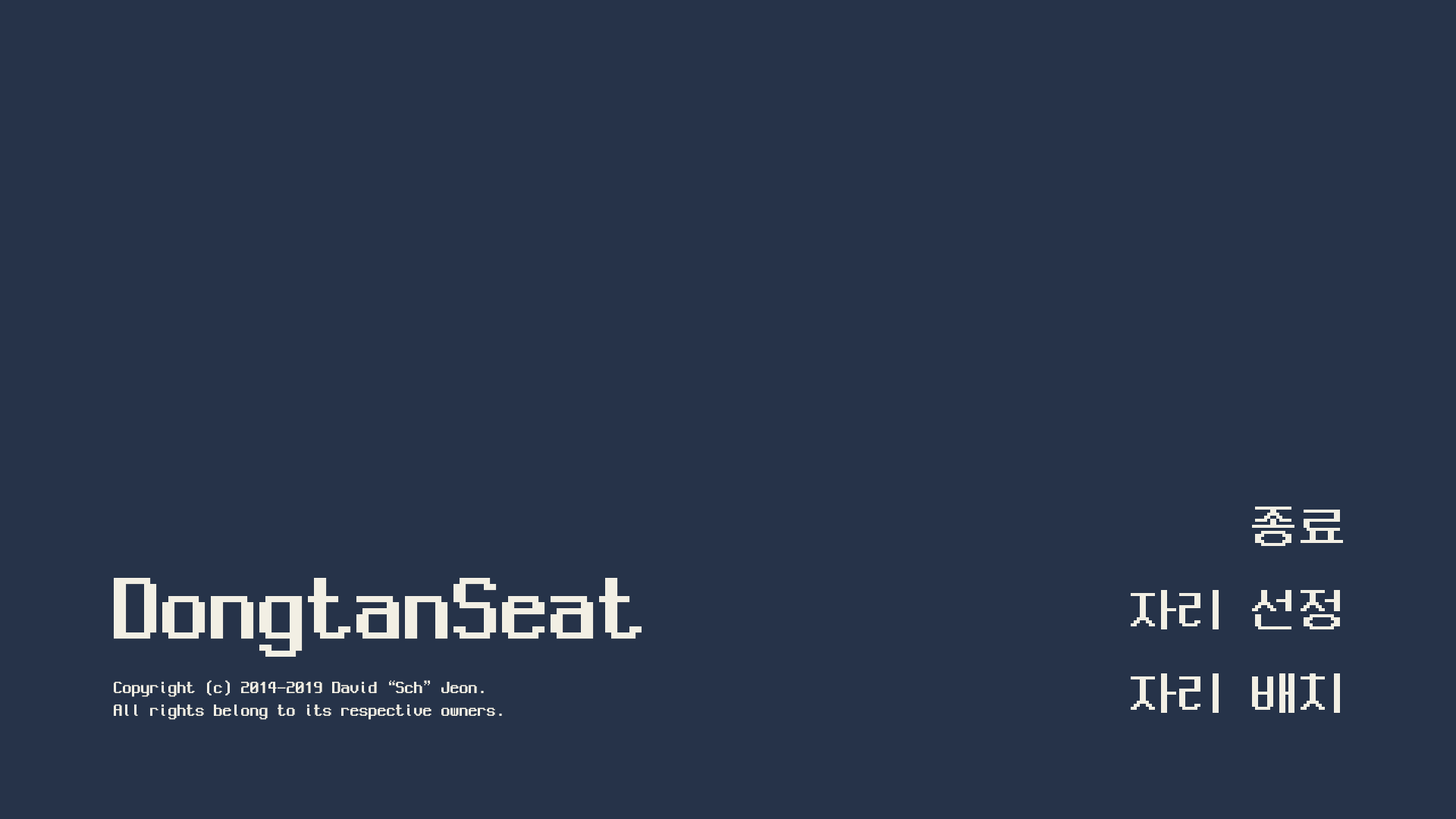
<style>
.page{position:relative;width:1456px;height:819px;background:#263349}
.page>*{position:absolute;margin:0}
.t1{font:48.5px "NeoDunggeunmoCode-Regular";color:#f2efe4}
.t2{font:97.1px "NeoDunggeunmoCode-Regular";color:#f2efe4}
.t3{font:18.2px/22.7px "NeoDunggeunmoCode-Regular";color:#f2efe4}
</style>
<div class="page">
<p class="t1" style="left:1252px;top:507px;width:91px;height:39px">종료</p>
<p class="t2" style="left:114px;top:578px;width:528px;height:79px">DongtanSeat</p>
<p class="t1" style="left:1131px;top:590px;width:209px;height:39px">자리 선정</p>
<p class="t1" style="left:1131px;top:673px;width:209px;height:40px">자리 배치</p>
<p class="t3" style="left:114px;top:680px;width:388px;height:40px">Copyright (c) 2014-2019 David “Sch” Jeon.<br>All rights belong to its respective owners.</p>
</div>
